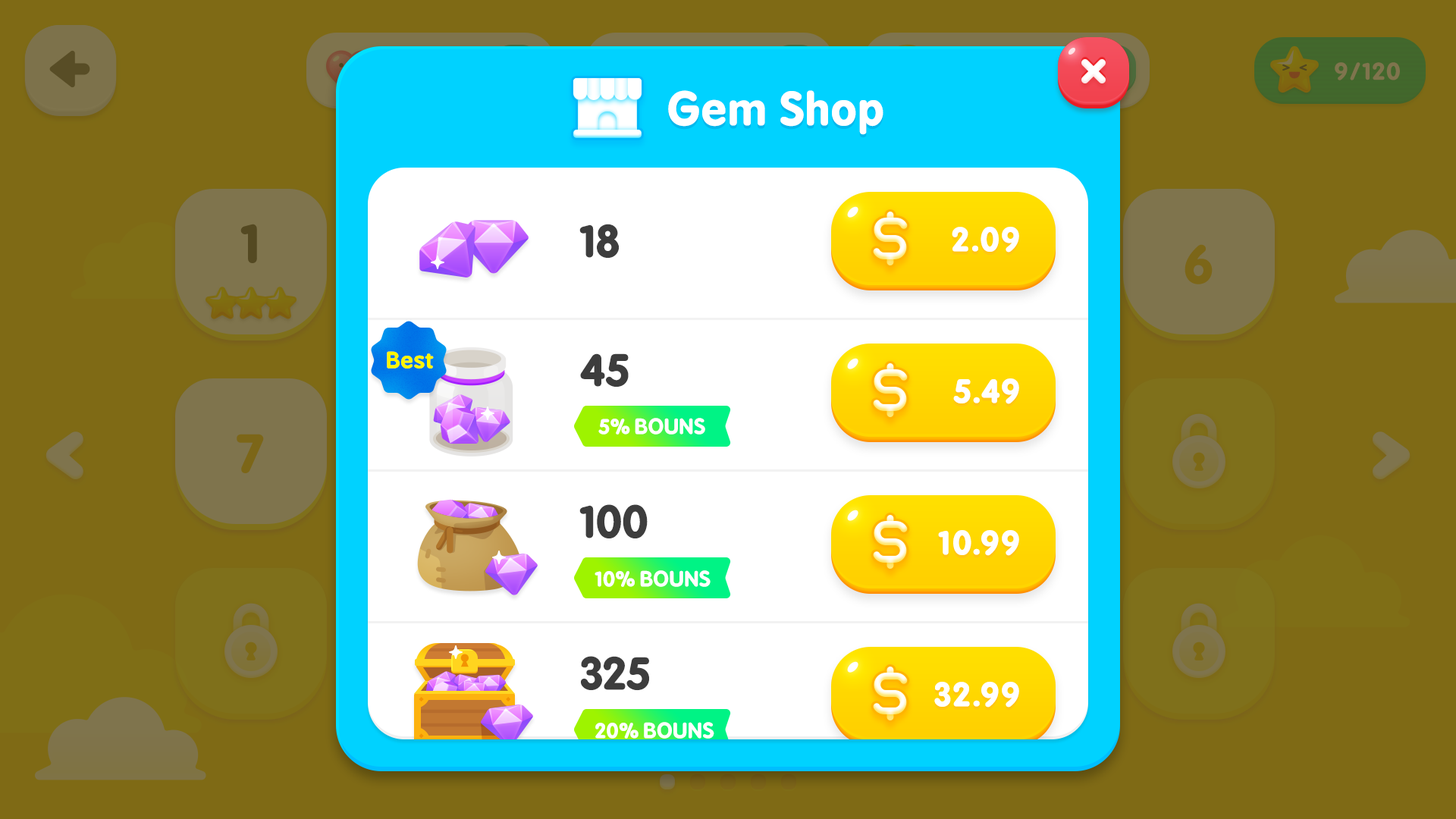
<style>
.page{position:relative;width:1456px;height:819px;background:#7f6a15}
.page>*{position:absolute;margin:0}
.t1{font:43.1px "BPreplay-Bold";color:#ffffff;scale:1.05 1}
.t2{font:43.2px "BPreplay-Bold";letter-spacing:-0.025em;color:#3d3d3d;scale:1.05 1}
.t3{font:31.7px "BPreplay-Bold";color:#ffffff;text-transform:uppercase;font-weight:bold;scale:1.05 1}
.t4{font:21.6px "BPreplay-Bold";color:#fef500;scale:1.05 1}
.t5{font:20.2px "BPreplay-Bold";letter-spacing:-0.025em;color:#ffffff;scale:1.05 1}
</style>
<div class="page">
<p class="t1" style="left:668px;top:90px;width:215px;height:45px">Gem Shop</p>
<p class="t2" style="left:579px;top:224px;width:41px;height:35px">18</p>
<p class="t3" style="left:952px;top:227px;width:67px;height:26px">2.09</p>
<p class="t4" style="left:387px;top:351px;width:47px;height:18px">Best</p>
<p class="t2" style="left:580px;top:353px;width:49px;height:35px">45</p>
<p class="t3" style="left:953px;top:378px;width:66px;height:26px">5.49</p>
<p class="t5" style="left:598px;top:418px;width:107px;height:17px">5% BOUNS</p>
<p class="t2" style="left:579px;top:504px;width:69px;height:35px">100</p>
<p class="t3" style="left:938px;top:530px;width:81px;height:26px">10.99</p>
<p class="t5" style="left:595px;top:570px;width:116px;height:17px">10% BOUNS</p>
<p class="t2" style="left:581px;top:656px;width:68px;height:35px">325</p>
<p class="t3" style="left:934px;top:682px;width:85px;height:26px">32.99</p>
<p class="t5" style="left:595px;top:722px;width:119px;height:17px">20% BOUNS</p>
</div>
